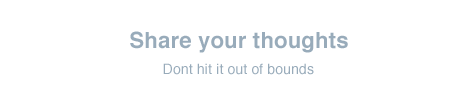
<style>
.page{position:relative;width:472px;height:100px;background:#ffffff}
.page>*{position:absolute;margin:0}
.t1{font:22px "Helvetica-Bold";letter-spacing:0.01em;color:#98abba}
.t2{font:14px "Helvetica";letter-spacing:0.01em;color:#98abba}
</style>
<div class="page">
<p class="t1" style="left:130px;top:31px;width:218px;height:22px">Share your thoughts</p>
<p class="t2" style="left:163px;top:63px;width:151px;height:12px">Dont hit it out of bounds</p>
</div>
